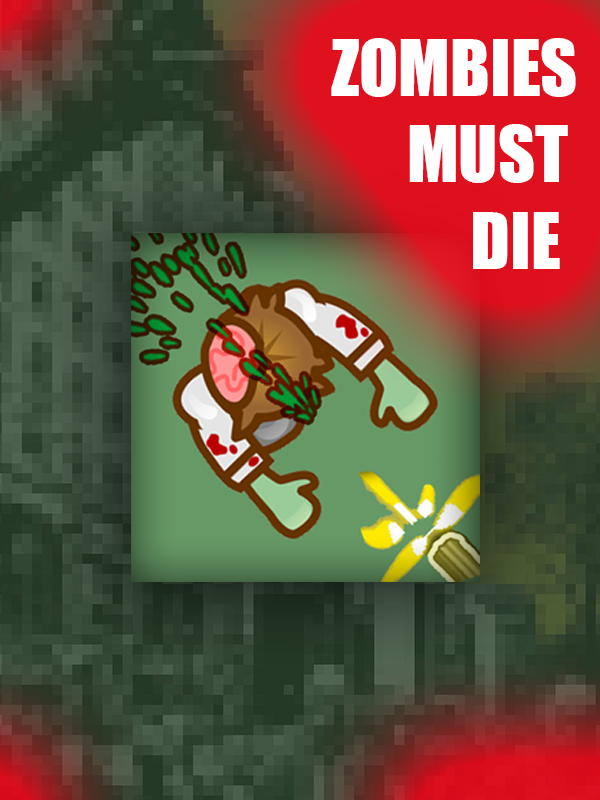
<style>
.page{position:relative;width:600px;height:800px}
.page>*{position:absolute;margin:0}
.t1{font:72px "Impact";color:#ffffff}
</style>
<div class="page">
<p class="t1" style="left:331px;top:38px;width:245px;height:231px;text-align:right">ZOMBIES<br>      MUST <br>           DIE</p>
</div>
